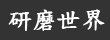
<style>
.page{position:relative;width:110px;height:40px;background:#333333}
.page>*{position:absolute;margin:0}
.t1{font:24px "DFKaiShu-SB-Estd-BF";color:#ffffff;font-weight:bold}
</style>
<div class="page">
<p class="t1" style="left:8px;top:9px;width:97px;height:22px">研磨世界</p>
</div>
